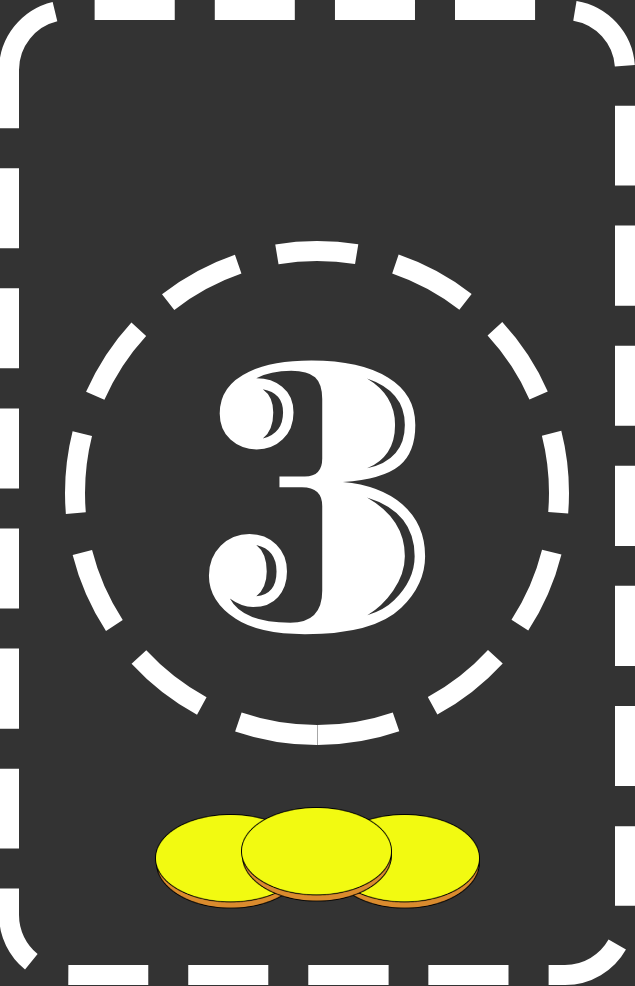
<style>
.page{position:relative;width:635px;height:986px;background:#333333}
.page>*{position:absolute;margin:0}
.t1{font:400px "BodoniHighlightICG";color:#ffffff}
</style>
<div class="page">
<p class="t1" style="left:208px;top:360px;width:218px;height:275px">3</p>
</div>
